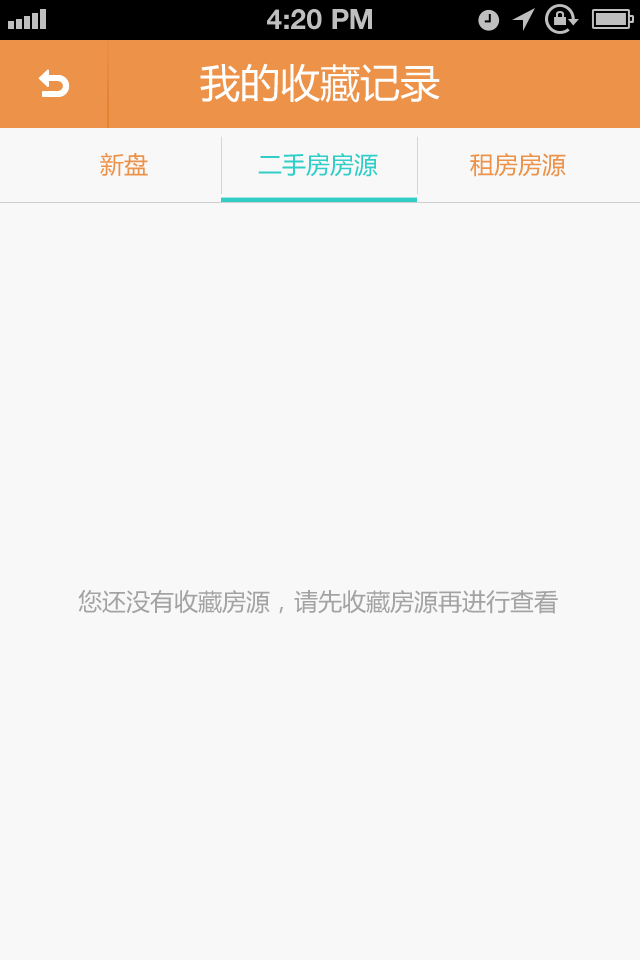
<style>
.page{position:relative;width:640px;height:960px;background:#f8f8f8}
.page>*{position:absolute;margin:0}
.t1{font:28px "HelveticaNeue-Bold";color:#bfbfbf;text-transform:uppercase}
.t2{font:40px "MicrosoftYaHei";color:#ffffff}
.t3{font:24px "MicrosoftYaHei";color:#ed9249}
.t4{font:24px "MicrosoftYaHei";color:#31cec8}
.t5{font:24px "MicrosoftYaHei";color:#a3a3a3}
</style>
<div class="page">
<p class="t1" style="left:267px;top:9px;width:105px;height:21px">4:20 PM</p>
<p class="t2" style="left:200px;top:63px;width:240px;height:40px">我的收藏记录</p>
<p class="t3" style="left:100px;top:152px;width:48px;height:24px">新盘</p>
<p class="t4" style="left:258px;top:153px;width:120px;height:24px">二手房房源</p>
<p class="t3" style="left:470px;top:153px;width:96px;height:24px">租房房源</p>
<p class="t5" style="left:78px;top:589px;width:480px;height:25px">您还没有收藏房源，请先收藏房源再进行查看</p>
</div>
